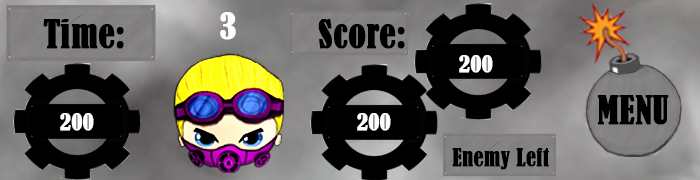
<style>
.page{position:relative;width:700px;height:180px}
.page>*{position:absolute;margin:0}
.t1{font:33.9px "BernardMT-Condensed";color:#fdfdfd;font-weight:bold}
.t2{font:36px "BernardMT-Condensed";color:#000000;font-weight:bold}
.t3{font:22px "BernardMT-Condensed";color:#fdfdfd;font-weight:bold}
.t4{font:22px "BernardMT-Condensed";color:#000000;font-weight:bold}
</style>
<div class="page">
<p class="t1" style="left:220px;top:12px;width:16px;height:28px">3</p>
<p class="t2" style="left:43px;top:19px;width:81px;height:30px">Time:</p>
<p class="t2" style="left:318px;top:19px;width:87px;height:30px">Score:</p>
<p class="t3" style="left:459px;top:55px;width:34px;height:18px">200</p>
<p class="t2" style="left:597px;top:95px;width:72px;height:30px">MENU</p>
<p class="t3" style="left:60px;top:113px;width:34px;height:18px">200</p>
<p class="t3" style="left:357px;top:113px;width:34px;height:18px">200</p>
<p class="t4" style="left:452px;top:148px;width:97px;height:22px">Enemy Left</p>
</div>
